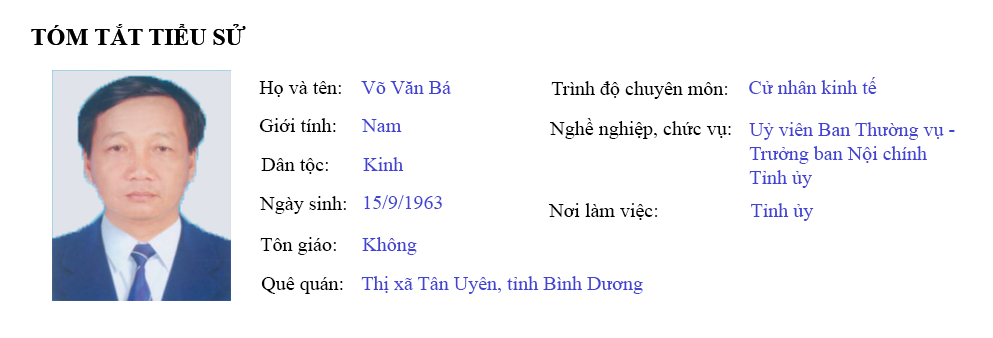
<style>
.page{position:relative;width:993px;height:338px;background:#ffffff}
.page>*{position:absolute;margin:0}
.t1{font:24px "TimesNewRomanPS-BoldMT";color:#000000}
.t2{font:20px "TimesNewRomanPSMT";color:#4343d4}
.t3{font:20px "TimesNewRomanPSMT";color:#000000}
.t4{font:20px/24px "TimesNewRomanPSMT";color:#4343d4}
</style>
<div class="page">
<p class="t1" style="left:31px;top:24px;width:215px;height:21px">TÓM TẮT TIỂU SỬ</p>
<p class="t2" style="left:749px;top:77px;width:128px;height:17px">Cử nhân kinh tế</p>
<p class="t3" style="left:259px;top:81px;width:82px;height:16px">Họ và tên:</p>
<p class="t2" style="left:361px;top:81px;width:91px;height:13px">Võ Văn Bá</p>
<p class="t3" style="left:551px;top:81px;width:177px;height:18px">Trình độ chuyên môn:</p>
<p class="t3" style="left:259px;top:118px;width:77px;height:14px">Giới tính:</p>
<p class="t2" style="left:361px;top:119px;width:41px;height:13px">Nam</p>
<p class="t3" style="left:549px;top:118px;width:182px;height:21px">Nghề nghiệp, chức vụ:</p>
<p class="t4" style="left:749px;top:122px;width:206px;height:66px">Uỷ viên Ban Thường vụ - <br>Trưởng ban Nội chính <br>Tỉnh ủy</p>
<p class="t3" style="left:261px;top:158px;width:67px;height:16px">Dân tộc:</p>
<p class="t2" style="left:363px;top:157px;width:41px;height:14px">Kinh</p>
<p class="t3" style="left:259px;top:196px;width:87px;height:18px">Ngày sinh:</p>
<p class="t2" style="left:364px;top:195px;width:78px;height:14px">15/9/1963</p>
<p class="t3" style="left:548px;top:203px;width:110px;height:17px">Nơi làm việc:</p>
<p class="t2" style="left:751px;top:203px;width:63px;height:18px">Tỉnh ủy</p>
<p class="t3" style="left:260px;top:237px;width:76px;height:18px">Tôn giáo:</p>
<p class="t2" style="left:362px;top:237px;width:55px;height:18px">Không</p>
<p class="t3" style="left:261px;top:277px;width:82px;height:17px">Quê quán:</p>
<p class="t2" style="left:361px;top:276px;width:282px;height:18px">Thị xã Tân Uyên, tỉnh Bình Dương</p>
</div>
